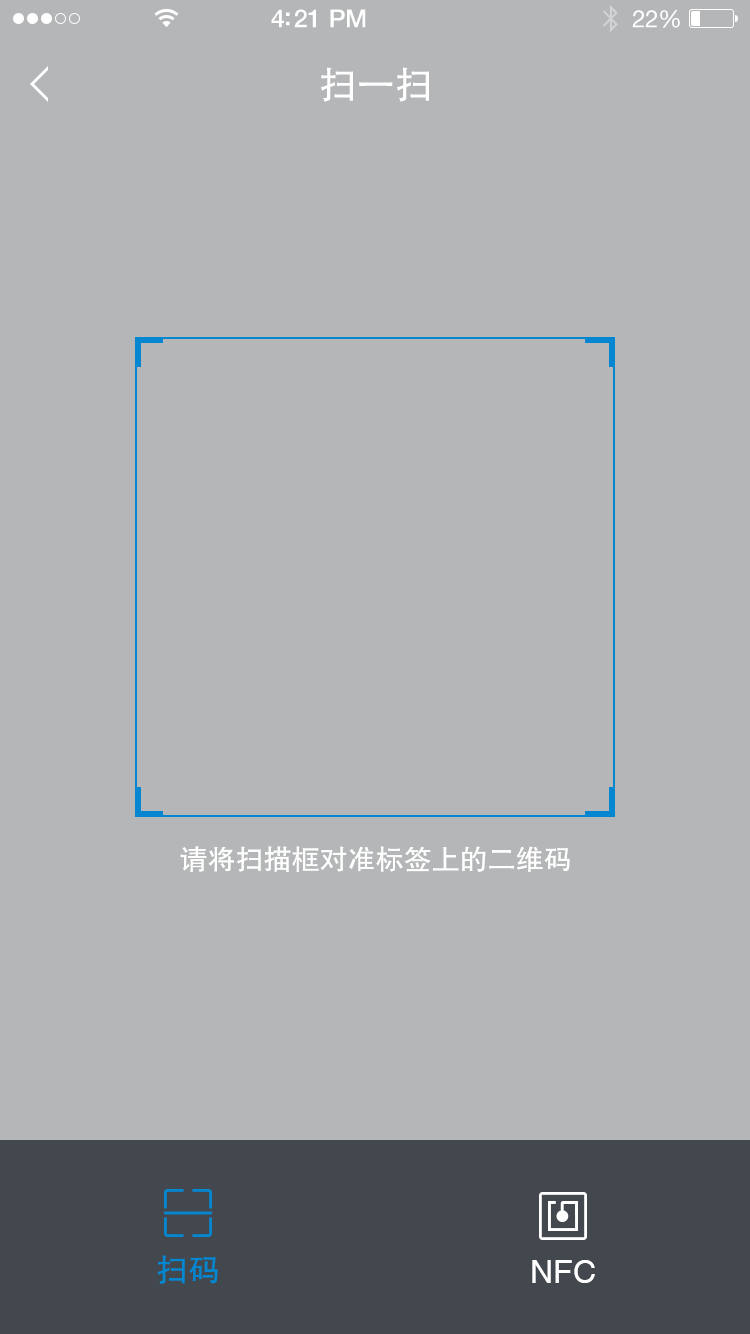
<style>
.page{position:relative;width:750px;height:1334px;background:#b4b6b8}
.page>*{position:absolute;margin:0}
.t1{font:38px "FZHTJW--GB1-0";color:#ffffff}
.t2{font:28px "FZHTJW--GB1-0";color:#ffffff}
.t3{font:32px "FZHTJW--GB1-0";color:#0487d0}
.t4{font:32px "Helvetica";color:#ffffff}
</style>
<div class="page">
<p class="t1" style="left:321px;top:67px;width:108px;height:35px">扫一扫</p>
<p class="t2" style="left:180px;top:846px;width:390px;height:26px">请将扫描框对准标签上的二维码</p>
<p class="t3" style="left:157px;top:1255px;width:61px;height:29px">扫码</p>
<p class="t4" style="left:532px;top:1260px;width:63px;height:23px">NFC</p>
</div>
